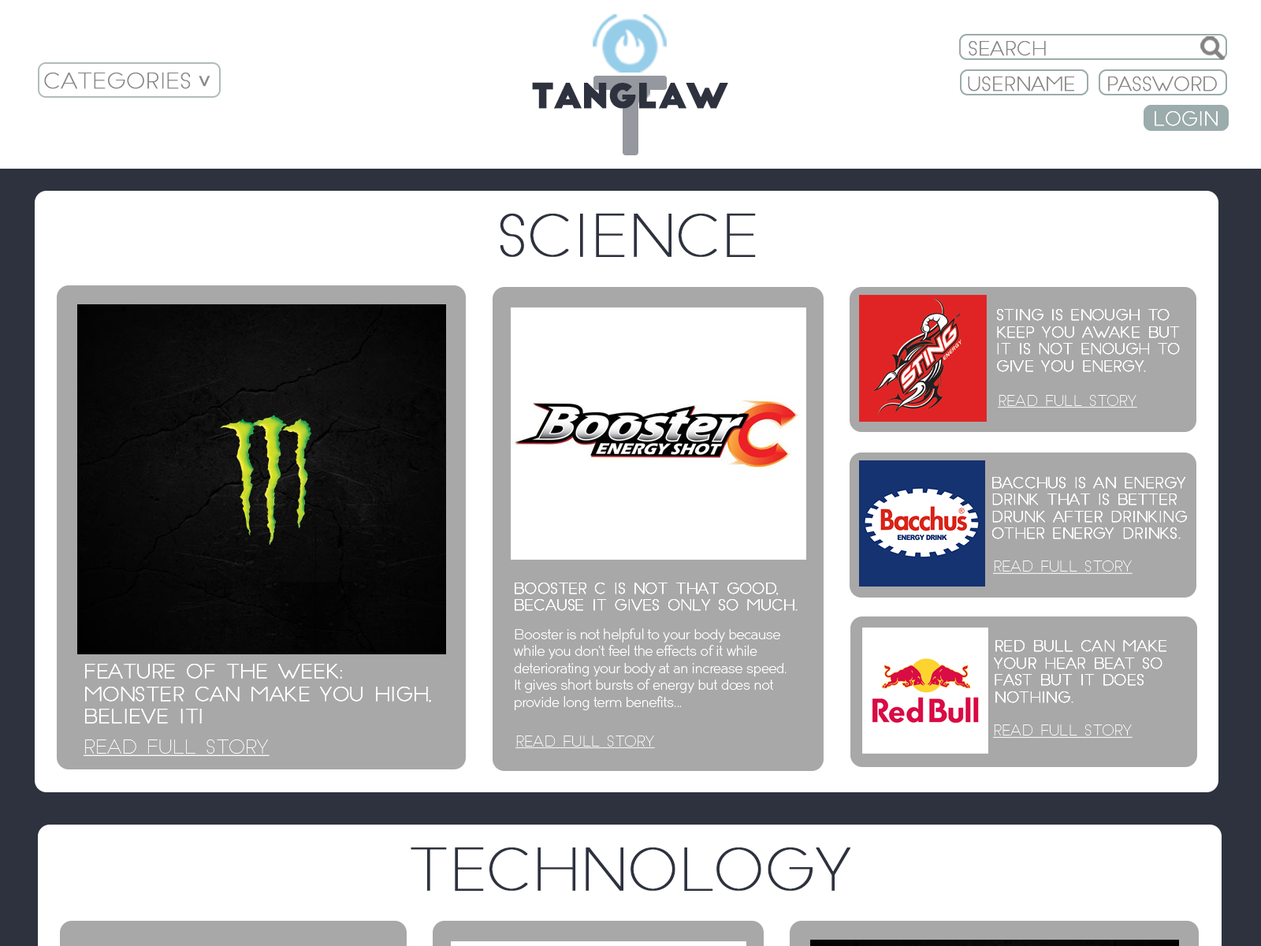
<style>
.page{position:relative;width:1261px;height:946px;background:#ffffff}
.page>*{position:absolute;margin:0}
.t1{font:18.4px "SlimJoe";color:#898989;font-weight:bold}
.t2{font:21.5px "SlimJoe";color:#898989;font-weight:bold}
.t3{font:21.5px "MyriadPro-Regular";color:#898989;font-weight:bold}
.t4{font:33.6px "BigJohn";color:#2e323f;font-weight:bold}
.t5{font:18.4px "SlimJoe";color:#ffffff;font-weight:bold}
.t6{font:56.7px "SlimJoe";color:#2e323f;font-weight:bold}
.t7{font:14.2px "SlimJoe";color:#ffffff;font-weight:bold}
.t8{font:14.2px "SlimJoe";color:#ffffff;text-decoration:underline}
.t9{font:14.2px "Dual-300";color:#ffffff}
.t10{font:18.8px "SlimJoe";color:#ffffff;font-weight:bold}
.t11{font:18.8px "SlimJoe";color:#ffffff;text-decoration:underline}
</style>
<div class="page">
<p class="t1" style="left:969px;top:41px;width:77px;height:15px">SEARCH</p>
<p class="t1" style="left:969px;top:41px;width:77px;height:15px">SEARCH</p>
<p class="t2" style="left:44px;top:73px;width:147px;height:16px">CATEGORIES</p>
<p class="t3" style="left:199px;top:76px;width:11px;height:11px;rotate:180deg">^</p>
<p class="t1" style="left:968px;top:76px;width:106px;height:15px">userName</p>
<p class="t1" style="left:968px;top:76px;width:106px;height:15px">userName</p>
<p class="t1" style="left:1108px;top:76px;width:109px;height:15px">Password</p>
<p class="t1" style="left:1108px;top:76px;width:109px;height:15px">Password</p>
<p class="t4" style="left:532px;top:82px;width:196px;height:27px">TANGLAW</p>
<p class="t5" style="left:1155px;top:111px;width:63px;height:15px">LOGIN</p>
<p class="t5" style="left:1155px;top:111px;width:63px;height:15px">LOGIN</p>
<p class="t6" style="left:500px;top:213px;width:256px;height:44px">SCIENCE</p>
<p class="t7" style="left:997px;top:309px;width:183px;height:63px">Sting is enough to<br>keep you awake but<br>it is not enough to<br>give you energy.</p>
<p class="t7" style="left:997px;top:309px;width:183px;height:63px">Sting is enough to<br>keep you awake but<br>it is not enough to<br>give you energy.</p>
<p class="t8" style="left:998px;top:395px;width:139px;height:13px">Read Full Story</p>
<p class="t7" style="left:992px;top:477px;width:195px;height:62px">Bacchus is an energy<br>drink that is better<br>drunk after drinking<br>other energy drinks.</p>
<p class="t7" style="left:992px;top:477px;width:195px;height:62px">Bacchus is an energy<br>drink that is better<br>drunk after drinking<br>other energy drinks.</p>
<p class="t8" style="left:993px;top:560px;width:139px;height:14px">Read Full Story</p>
<p class="t7" style="left:515px;top:582px;width:283px;height:29px">Booster C is not that gooD,<br>bECAUSE IT GIVES ONLY SO MUCH.</p>
<p class="t7" style="left:515px;top:582px;width:283px;height:29px">Booster C is not that gooD,<br>bECAUSE IT GIVES ONLY SO MUCH.</p>
<p class="t9" style="left:514px;top:628px;width:272px;height:82px">Booster is not helpful to your body because <br>while you don't feel the effects of it while <br>deteriorating your body at an increase speed.<br>It gives short bursts of energy but does not<br>provide long term benefits...</p>
<p class="t7" style="left:994px;top:640px;width:172px;height:63px">RED bull can make<br>your hear beat so<br>fast but it does<br>nothing.</p>
<p class="t7" style="left:994px;top:640px;width:172px;height:63px">RED bull can make<br>your hear beat so<br>fast but it does<br>nothing.</p>
<p class="t10" style="left:85px;top:664px;width:346px;height:59px">Feature of the week:<br>MONSTER CAN MAKE YOU HIGH,<br>Believe it!</p>
<p class="t10" style="left:85px;top:664px;width:346px;height:59px">Feature of the week:<br>MONSTER CAN MAKE YOU HIGH,<br>Believe it!</p>
<p class="t8" style="left:993px;top:724px;width:139px;height:14px">Read Full Story</p>
<p class="t8" style="left:515px;top:735px;width:140px;height:14px">READ FULL STORY</p>
<p class="t11" style="left:84px;top:739px;width:186px;height:17px">Read Full Story</p>
<p class="t6" style="left:411px;top:846px;width:439px;height:45px">Technology</p>
</div>
